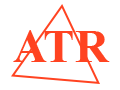
<style>
.page{position:relative;width:120px;height:90px;background:#ffffff}
.page>*{position:absolute;margin:0}
.t1{font:47.5px "TimesNewRomanPS-BoldMT";color:#ff4321}
</style>
<div class="page">
<p class="t1" style="left:13px;top:30px;width:97px;height:32px">ATR</p>
</div>
